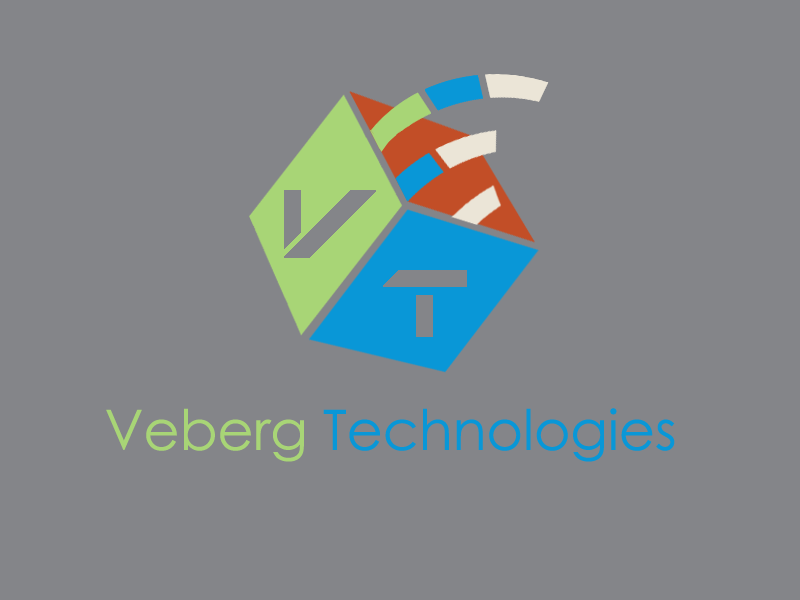
<style>
.page{position:relative;width:800px;height:600px;background:#848589}
.page>*{position:absolute;margin:0}
.t1{font:55.6px "CenturyGothic";color:#0997d7}
.t2{font:55.6px "CenturyGothic";color:#a8d576}
</style>
<div class="page">
<p class="t1" style="left:106px;top:408px;width:569px;height:54px"><span class="t2">Veberg </span>Technologies</p>
</div>
